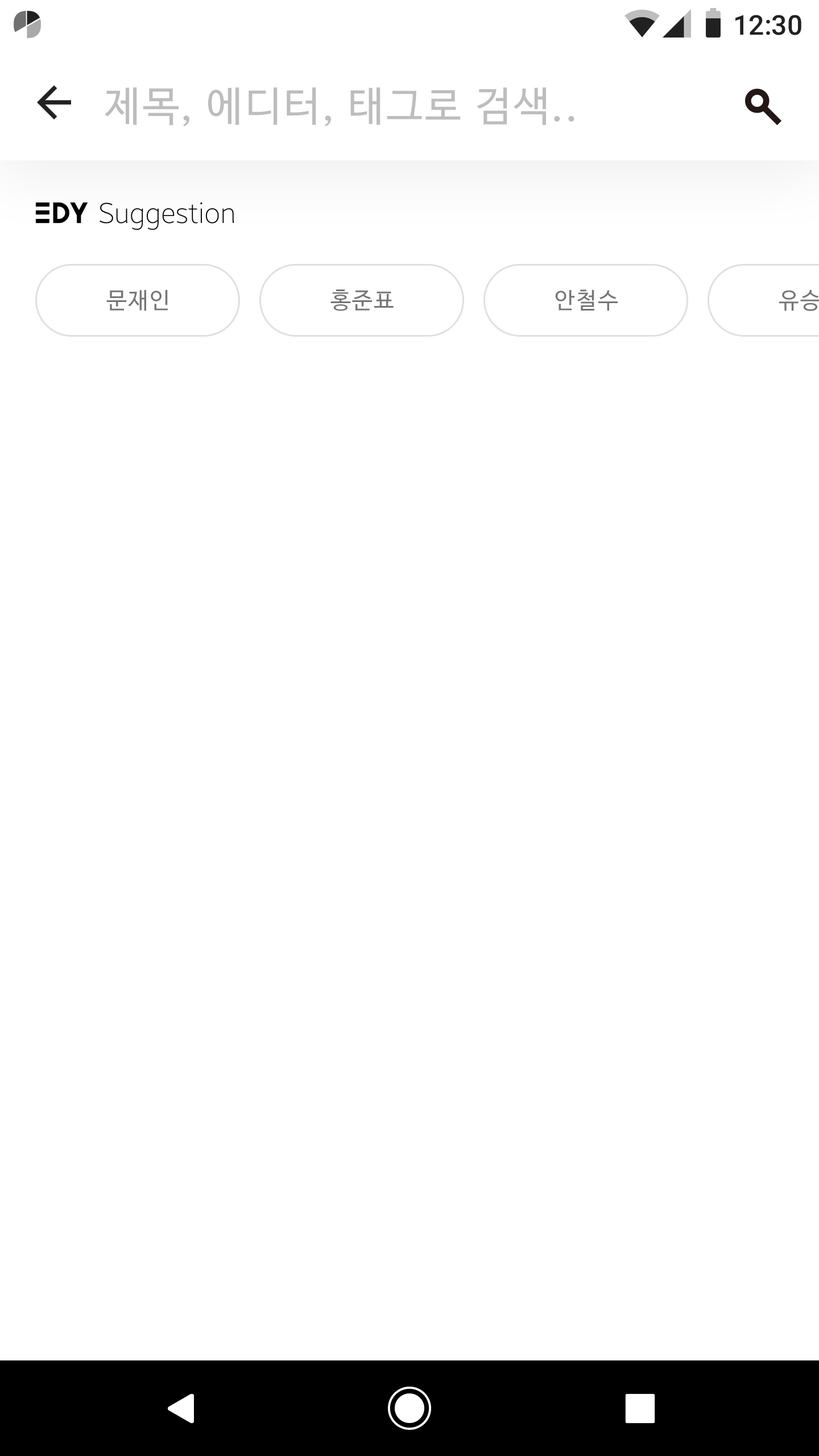
<style>
.page{position:relative;width:819px;height:1456px;background:#ffffff}
.page>*{position:absolute;margin:0}
.t1{font:27.3px "Roboto-Medium";color:#212121}
.t2{font:40.9px "NanumBarunGothic";letter-spacing:0.05em;color:#bdbdbd}
.t3{font:22.7px "NanumBarunGothic";letter-spacing:0.05em;color:#757575}
</style>
<div class="page">
<p class="t1" style="left:735px;top:15px;width:66px;height:20px">12:30</p>
<p class="t2" style="left:105px;top:87px;width:469px;height:39px">제목, 에디터, 태그로 검색..</p>
<p class="t3" style="left:106px;top:289px;width:62px;height:22px">문재인</p>
<p class="t3" style="left:330px;top:289px;width:64px;height:22px">홍준표</p>
<p class="t3" style="left:555px;top:289px;width:63px;height:22px">안철수</p>
</div>
